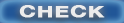
<style>
.page{position:relative;width:124px;height:23px}
.page>*{position:absolute;margin:0}
.t1{font:16px "HelveticaNeue-Bold";color:#ffffff;font-weight:bold;scale:1.4 1}
</style>
<div class="page">
<p class="t1" style="left:19px;top:5px;width:86px;height:13px">CHECK</p>
</div>
